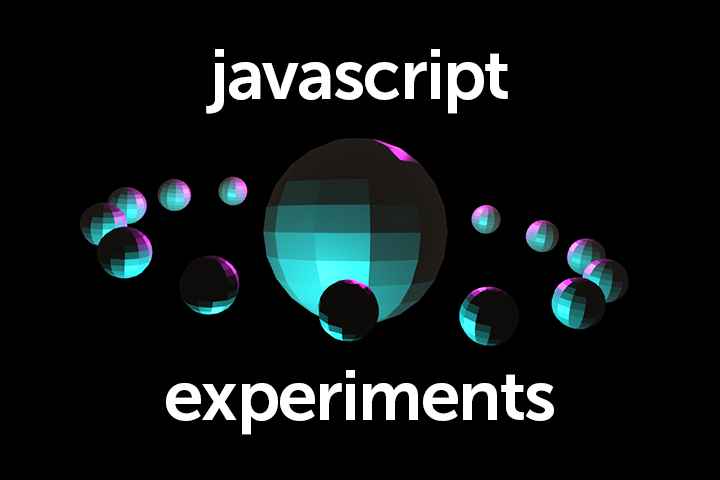
<style>
.page{position:relative;width:720px;height:480px;background:#000000}
.page>*{position:absolute;margin:0}
.t1{font:70.5px "MuseoSans-700";letter-spacing:-0.025em;color:#ffffff}
</style>
<div class="page">
<p class="t1" style="left:206px;top:49px;width:302px;height:65px">javascript</p>
<p class="t1" style="left:166px;top:370px;width:388px;height:65px">experiments</p>
</div>
